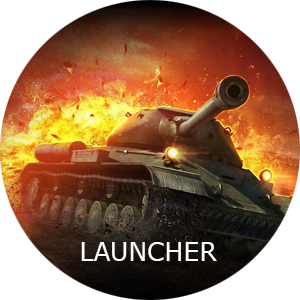
<style>
.page{position:relative;width:300px;height:300px;background:#ffffff}
.page>*{position:absolute;margin:0}
.t1{font:25px "Verdana";color:#ffffff}
</style>
<div class="page">
<p class="t1" style="left:81px;top:242px;width:136px;height:19px">LAUNCHER</p>
</div>
